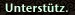
<style>
.page{position:relative;width:75px;height:15px}
.page>*{position:absolute;margin:0}
.t1{font:12px "StoneSansSemITCTTSemi";color:#d8ffe1}
</style>
<div class="page">
<p class="t1" style="left:5px;top:3px;width:63px;height:9px">Unterstütz.</p>
</div>
